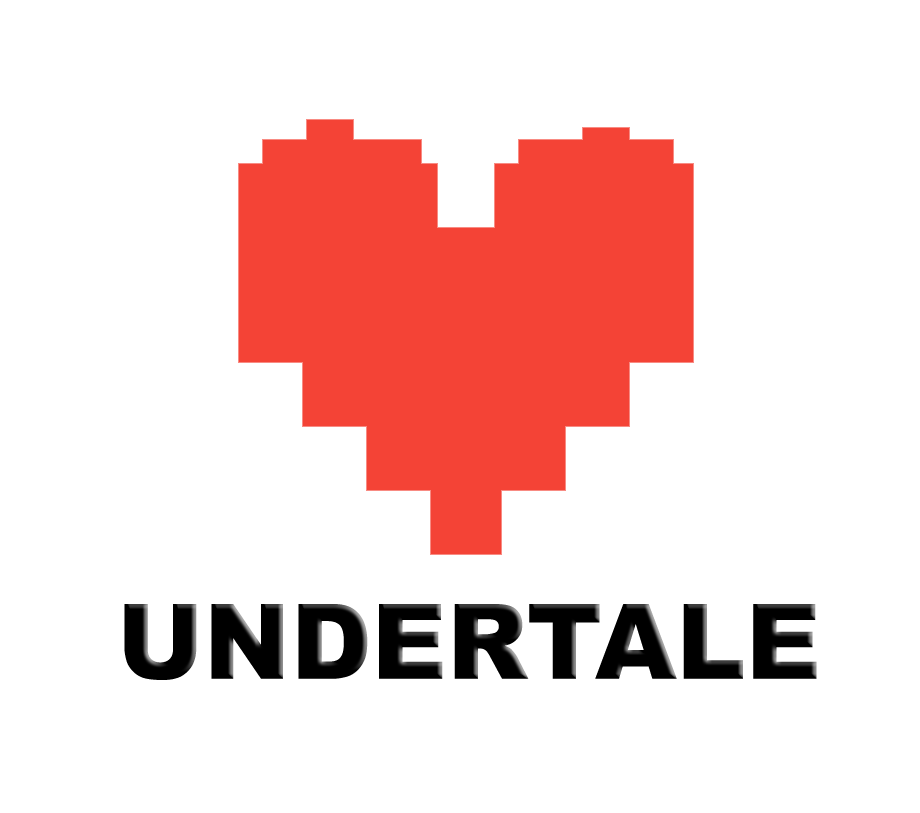
<style>
.page{position:relative;width:920px;height:813px;background:#ffffff}
.page>*{position:absolute;margin:0}
.t1{font:104.2px "Arial-Black";color:#000000}
</style>
<div class="page">
<p class="t1" style="left:124px;top:604px;width:693px;height:76px">UNDERTALE</p>
</div>
